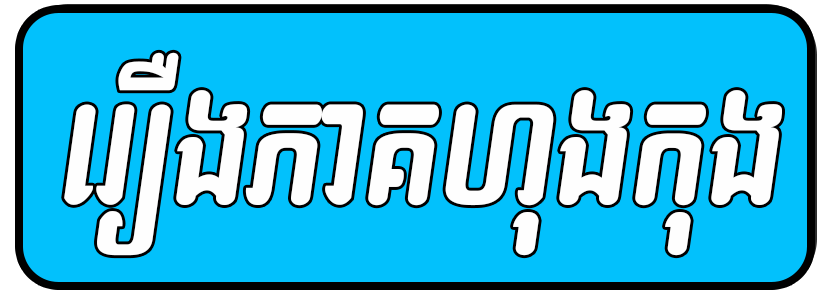
<style>
.page{position:relative;width:834px;height:293px;background:#02c1fc}
.page>*{position:absolute;margin:0}
.t1{font:146.7px "KhBaphnom06Veal-Sbouv-Italic";color:#fefefe;scale:0.8 1}
</style>
<div class="page">
<p class="t1" style="left:64px;top:52px;width:718px;height:204px">រឿងភាគហុងកុង</p>
</div>
